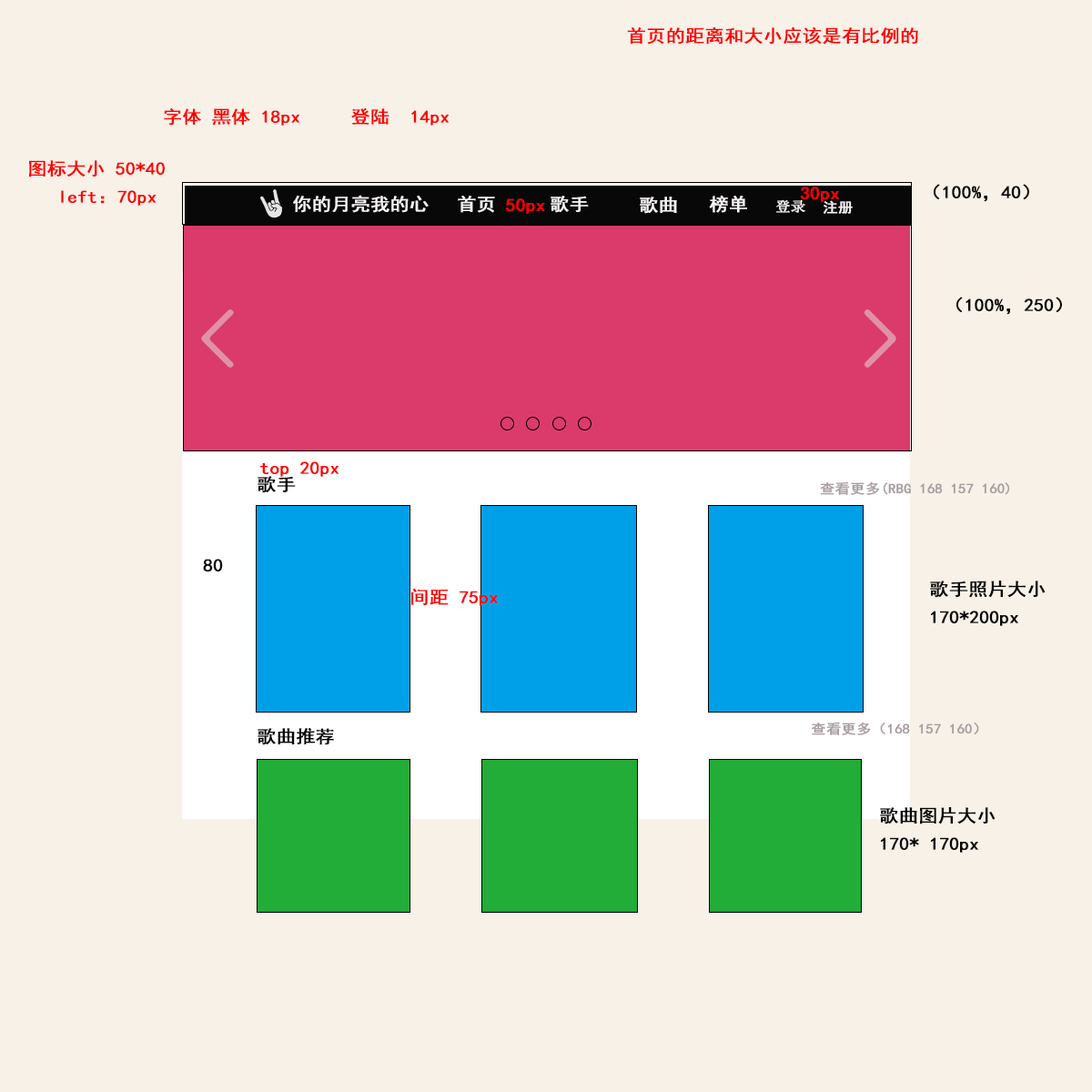
<style>
.page{position:relative;width:1092px;height:1092px;background:#f7f1e8}
.page>*{position:absolute;margin:0}
.t1{font:17.7px "SimHei";color:#ff0000;font-weight:bold;scale:1.07 1}
.t2{font:17.7px "SimHei";color:#050505;font-weight:bold;scale:1.07 1}
.t3{font:17.7px "SimHei";color:#f7f3f4;font-weight:bold;scale:1.07 1}
.t4{font:13.8px "SimSun";color:#f7f3f4;font-weight:bold;scale:1.07 1}
.t5{font:13.8px "SimHei";color:#f7f3f4;font-weight:bold;scale:1.07 1}
.t6{font:13.8px "SimHei";color:#a89da0;font-weight:bold;scale:1.07 1}
</style>
<div class="page">
<p class="t1" style="left:627px;top:27px;width:291px;height:18px">首页的距离和大小应该是有比例的</p>
<p class="t1" style="left:164px;top:108px;width:286px;height:18px">字体 黑体 18px     登陆  14px</p>
<p class="t1" style="left:29px;top:160px;width:136px;height:46px">图标大小 50*40<br>   left：70px</p>
<p class="t2" style="left:934px;top:184px;width:95px;height:18px">（100%，40）</p>
<p class="t3" style="left:293px;top:195px;width:136px;height:18px">你的月亮我的心</p>
<p class="t3" style="left:458px;top:196px;width:37px;height:17px">首页</p>
<p class="t3" style="left:551px;top:196px;width:38px;height:17px">歌手</p>
<p class="t3" style="left:640px;top:197px;width:37px;height:17px">歌曲</p>
<p class="t3" style="left:709px;top:196px;width:38px;height:17px">榜单</p>
<p class="t1" style="left:800px;top:187px;width:39px;height:15px">30px</p>
<p class="t1" style="left:505px;top:198px;width:40px;height:16px">50px</p>
<p class="t4" style="left:775px;top:199px;width:30px;height:14px">登录</p>
<p class="t5" style="left:824px;top:200px;width:29px;height:14px">注册</p>
<p class="t2" style="left:956px;top:297px;width:106px;height:18px">（100%，250）</p>
<p class="t1" style="left:259px;top:461px;width:80px;height:16px">top 20px</p>
<p class="t2" style="left:258px;top:476px;width:38px;height:17px">歌手</p>
<p class="t6" style="left:820px;top:481px;width:190px;height:14px">查看更多(RBG 168 157 160)</p>
<p class="t2" style="left:203px;top:559px;width:20px;height:12px">80</p>
<p class="t2" style="left:930px;top:581px;width:116px;height:45px">歌手照片大小<br>170*200px</p>
<p class="t1" style="left:410px;top:589px;width:88px;height:17px">间距 75px</p>
<p class="t6" style="left:812px;top:722px;width:167px;height:13px">查看更多（168 157 160）</p>
<p class="t2" style="left:258px;top:728px;width:76px;height:17px">歌曲推荐</p>
<p class="t2" style="left:880px;top:807px;width:116px;height:46px">歌曲图片大小<br>170* 170px</p>
</div>
